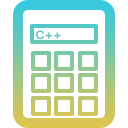
<style>
.page{position:relative;width:128px;height:128px;background:#ffffff}
.page>*{position:absolute;margin:0}
.t1{font:12px "SFPro-Semibold";letter-spacing:0.08em;color:#5fc8bd}
</style>
<div class="page">
<p class="t1" style="left:36px;top:30px;width:25px;height:10px">C++</p>
</div>
